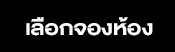
<style>
.page{position:relative;width:175px;height:52px;background:#000000}
.page>*{position:absolute;margin:0}
.t1{font:30.4px "DBHelvethaicaX-BdExt";color:#ffffff}
</style>
<div class="page">
<p class="t1" style="left:26px;top:17px;width:127px;height:19px">เลือกจองห้อง</p>
</div>
